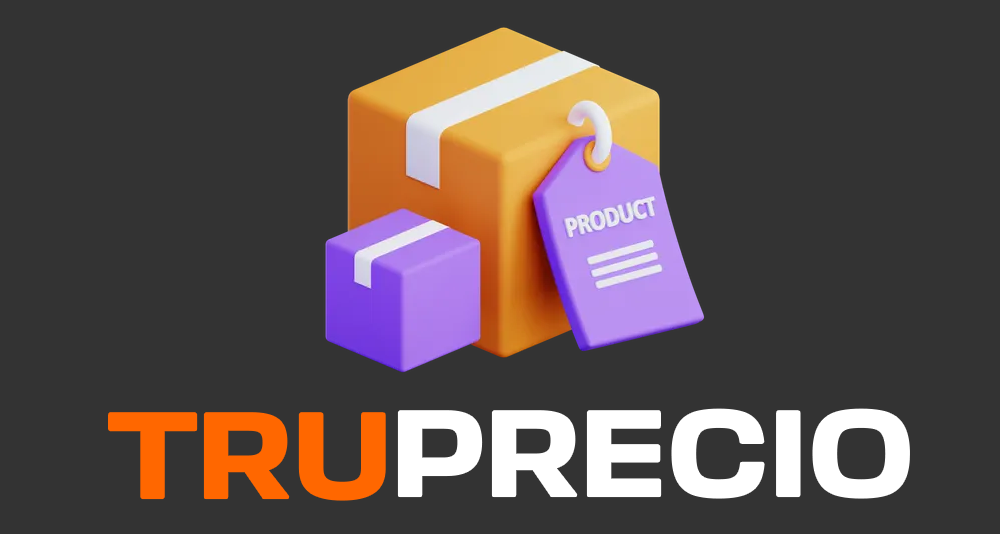
<style>
.page{position:relative;width:1000px;height:534px;background:#333333}
.page>*{position:absolute;margin:0}
.t1{font:120px "StapelText-Medium";color:#ff6700;text-transform:uppercase;scale:1.2 1}
.t2{font:120px "StapelText-Medium";color:#ffffff;text-transform:uppercase;scale:1.2 1}
</style>
<div class="page">
<p class="t1" style="left:110px;top:414px;width:274px;height:85px">tru</p>
<p class="t2" style="left:399px;top:410px;width:509px;height:87px">PRECIO</p>
</div>
